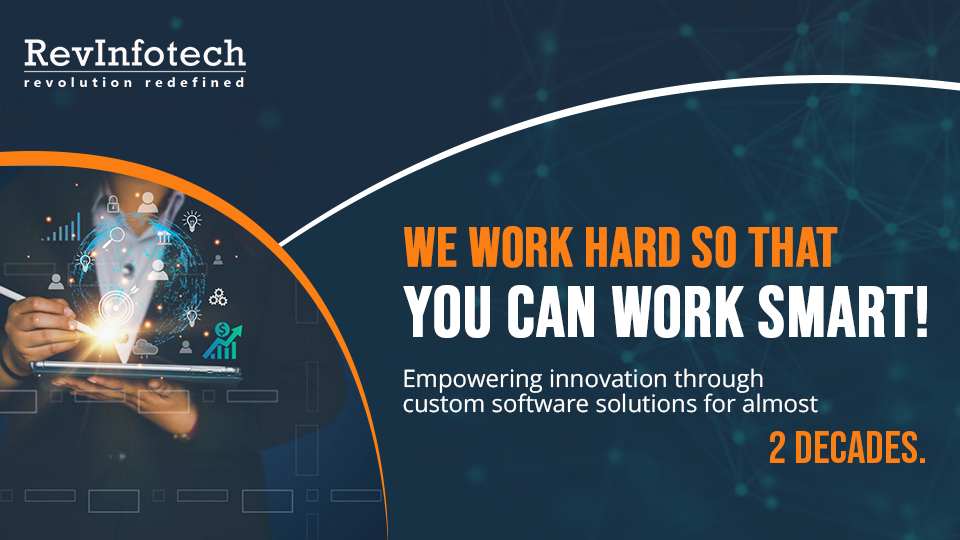
<style>
.page{position:relative;width:960px;height:540px}
.page>*{position:absolute;margin:0}
.t1{font:55.9px/70.6px "BebasNeue-Regular";color:#fb7f12;font-weight:bold}
.t2{font:70.9px/70.6px "BebasNeue-Regular";color:#ffffff;font-weight:bold}
.t3{font:23.9px/25.5px "OpenSans-Regular";color:#ffffff}
.t4{font:45.7px "BebasNeue-Regular";color:#fb7f12}
</style>
<div class="page">
<p class="t1" style="left:403px;top:226px;width:524px;height:112px">We work hard so that <br><span class="t2">you can work smart!</span></p>
<p class="t3" style="left:403px;top:368px;width:415px;height:45px">Empowering innovation through <br>custom software solutions for almost</p>
<p class="t4" style="left:770px;top:431px;width:155px;height:32px">2 Decades.</p>
</div>
